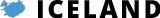
<style>
.page{position:relative;width:160px;height:18px;background:#ffffff}
.page>*{position:absolute;margin:0}
.t1{font:25px "OpenSans-Extrabold";letter-spacing:0.1em;color:#000000}
</style>
<div class="page">
<p class="t1" style="left:38px;top:0px;width:123px;height:19px">ICELAND</p>
</div>
